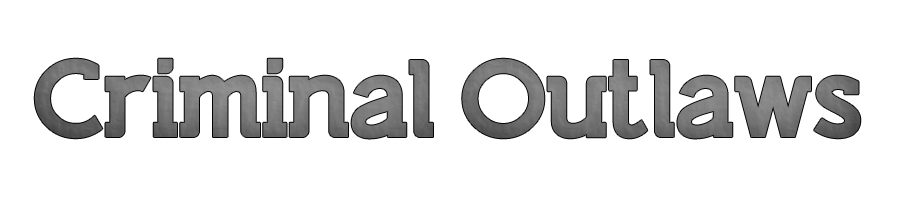
<style>
.page{position:relative;width:900px;height:200px;background:#ffffff}
.page>*{position:absolute;margin:0}
.t1{font:90px "LifestyleRoundedM54";letter-spacing:-0.05em;color:#787878}
</style>
<div class="page">
<p class="t1" style="left:34px;top:58px;width:827px;height:81px">Criminal Outlaws</p>
</div>
